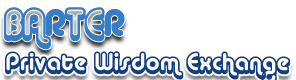
<style>
.page{position:relative;width:296px;height:80px;background:#ffffff}
.page>*{position:absolute;margin:0}
.t1{font:36px "AlbaSuper";color:#357ec7}
.t2{font:36px "AlbaMatter";color:#357ec7}
.t3{font:24px "AlbaSuper";color:#153e7e}
</style>
<div class="page">
<p class="t1" style="left:4px;top:7px;width:121px;height:43px">BA<span class="t2">R</span>TE<span class="t2">R</span></p>
<p class="t3" style="left:5px;top:51px;width:286px;height:29px">Private Wisdom Exchange</p>
</div>
